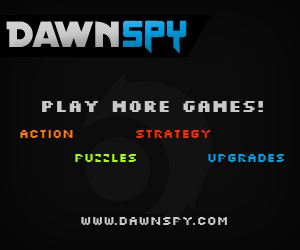
<style>
.page{position:relative;width:300px;height:250px}
.page>*{position:absolute;margin:0}
.t1{font:18px "Silkscreen-Bold";color:#c8c8c8}
.t2{font:14px "Silkscreen";color:#ff7800}
.t3{font:14px "Silkscreen";color:#ff2a00}
.t4{font:14px "Silkscreen";color:#a8ff00}
.t5{font:14px "Silkscreen";color:#00a0e3}
.t6{font:14px "Silkscreen";color:#cacaca}
</style>
<div class="page">
<p class="t1" style="left:42px;top:101px;width:221px;height:11px">Play more games!</p>
<p class="t2" style="left:20px;top:130px;width:53px;height:8px">Action</p>
<p class="t3" style="left:136px;top:130px;width:75px;height:8px">Strategy</p>
<p class="t4" style="left:75px;top:154px;width:61px;height:8px">Puzzles</p>
<p class="t5" style="left:208px;top:154px;width:76px;height:8px">Upgrades</p>
<p class="t6" style="left:81px;top:217px;width:146px;height:8px">www.dawnspy.com</p>
</div>
